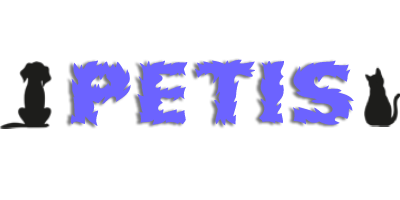
<style>
.page{position:relative;width:400px;height:200px;background:#ffffff}
.page>*{position:absolute;margin:0}
.t1{font:69.7px "FirecatMedium";color:#6c63ff}
</style>
<div class="page">
<p class="t1" style="left:70px;top:59px;width:284px;height:67px">Petis</p>
</div>
